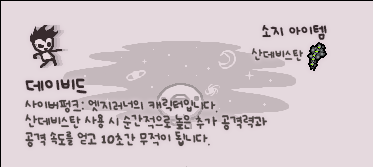
<style>
.page{position:relative;width:373px;height:167px;background:#e5d9de}
.page>*{position:absolute;margin:0}
.t1{font:12px "UhBeeSe_hyunBold";color:#372b2d}
.t2{font:12px "UhBeeSe_hyunBold";letter-spacing:-0.1em;color:#372b2d}
.t3{font:10px "UhBeeSe_hyunBold";color:#4c4442}
.t4{font:11px/13px "UhBeeSe_hyunBold";letter-spacing:-0.025em;color:#4c4442}
.t5{font:16px/23px "UhBeeSe_hyunBold";color:#372b2d}
.t6{font:11px/16px "UhBeeSe_hyunBold";letter-spacing:-0.025em;color:#4c4442}
.t7{font:11px/13px "UhBeeSe_hyun";letter-spacing:-0.025em;color:#4c4442}
.t8{font:11px/16px "UhBeeSe_hyun";letter-spacing:-0.025em;color:#4c4442}
.t9{font:16px/16px "Font_soulsV2_Body-Regular";letter-spacing:-0.025em;color:#4c4442}
</style>
<div class="page">
<p class="t1" style="left:262px;top:25px;width:65px;height:15px"><span class="t2">소</span>지 아이템</p>
<p class="t3" style="left:251px;top:48px;width:52px;height:14px">산데비스탄</p>
<p class="t4" style="left:25px;top:78px;width:243px;height:70px"><span class="t5">데이비드<br></span><span class="t6">사이버펑크: 엣지러너의 캐릭터입니다.<br></span>산데비스탄 사용 시 순간적으로 높은 추가 <span class="t7">공격력과<br></span><span class="t8">공격</span><span class="t6"> 속도를 얻고 </span><span class="t9">10</span><span class="t6">초간 무적이 됩니다.</span></p>
</div>
